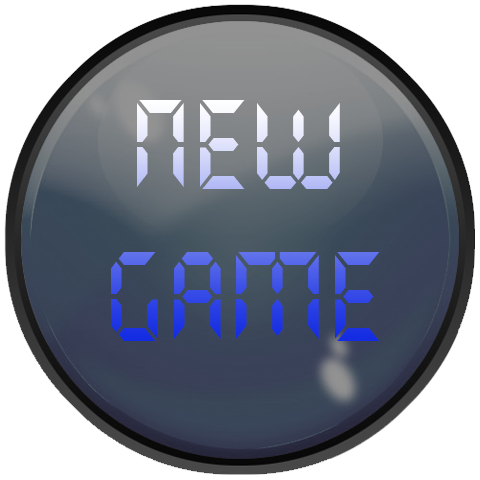
<style>
.page{position:relative;width:480px;height:480px;background:#ffffff}
.page>*{position:absolute;margin:0}
.t1{font:127px "QuartzMS";scale:0.79 1}
</style>
<div class="page">
<p class="t1" style="left:111px;top:100px;width:269px;height:241px">NEW <br>GAME</p>
</div>
